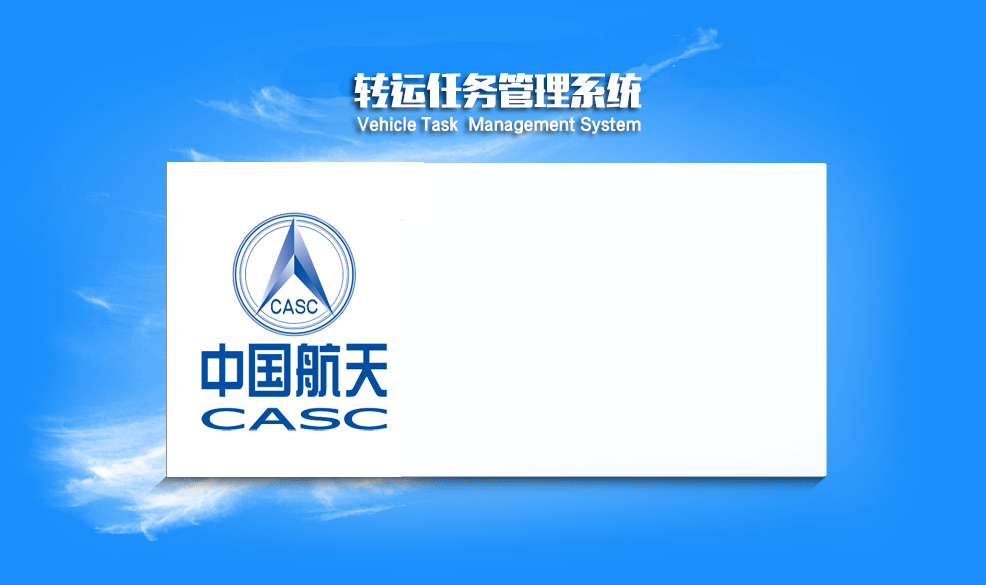
<style>
.page{position:relative;width:986px;height:585px;background:#fdfeff}
.page>*{position:absolute;margin:0}
.t1{font:36px "MFLiHei_Noncommercial-Regular";color:#fdfeff}
.t2{font:17px "FZCTHJW--GB1-0";color:#fdfeff}
</style>
<div class="page">
<p class="t1" style="left:354px;top:73px;width:288px;height:35px">转运任务管理系统</p>
<p class="t2" style="left:357px;top:116px;width:284px;height:18px">Vehicle Task  Management System</p>
</div>
